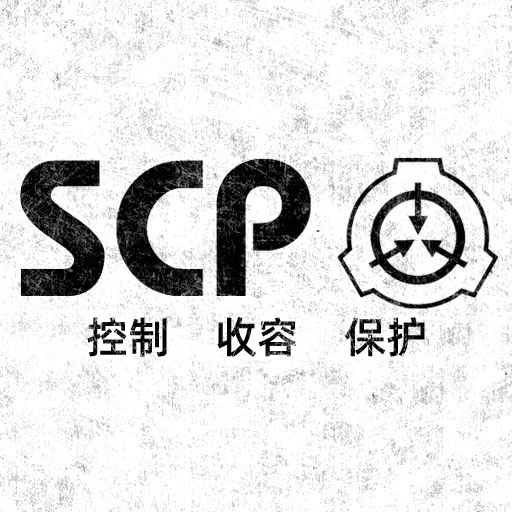
<style>
.page{position:relative;width:512px;height:512px;background:#ffffff}
.page>*{position:absolute;margin:0}
.t1{font:43px "AlibabaPuHuiTiM";color:#000000}
</style>
<div class="page">
<p class="t1" style="left:87px;top:317px;width:338px;height:41px">控制    收容    保护</p>
</div>
